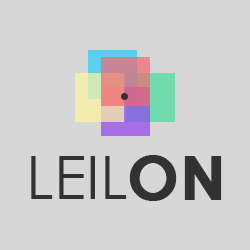
<style>
.page{position:relative;width:250px;height:250px;background:#d7d7d7}
.page>*{position:absolute;margin:0}
.t1{font:60.3px "CenturyGothic";color:#323232}
.t2{font:60.3px "CenturyGothic-Bold";color:#323232;font-weight:bold}
</style>
<div class="page">
<p class="t1" style="left:31px;top:155px;width:191px;height:46px">LEIL<span class="t2">ON</span></p>
</div>
